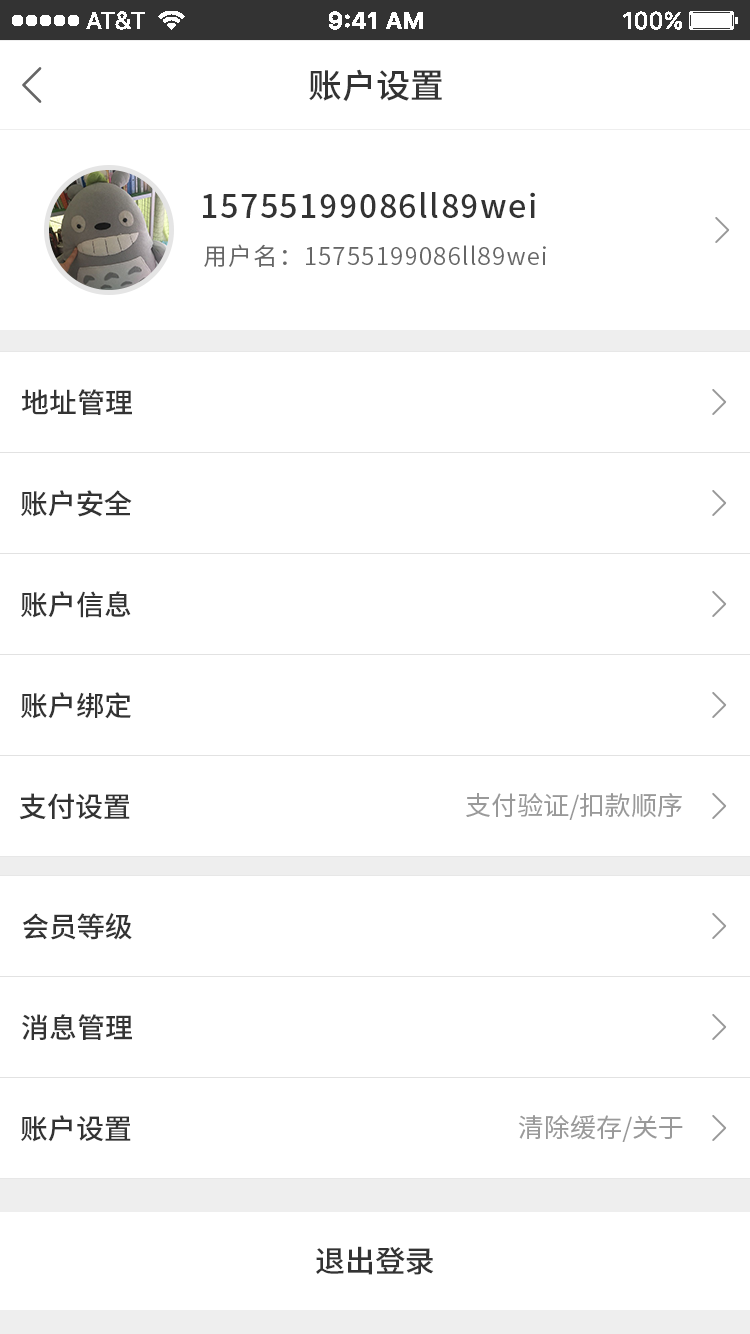
<style>
.page{position:relative;width:750px;height:1334px;background:#ffffff}
.page>*{position:absolute;margin:0}
.t1{font:34px "SourceHanSansCN-Medium";color:#333333}
.t2{font:32px "SourceHanSansCN-Medium";letter-spacing:0.05em;color:#333333}
.t3{font:24px "SourceHanSansCN-Normal";letter-spacing:0.05em;color:#666666}
.t4{font:28px "SourceHanSansCN-Medium";color:#333333}
.t5{font:26px "SourceHanSansCN-Regular";color:#999999}
.t6{font:30px "SourceHanSansCN-Medium";color:#333333}
</style>
<div class="page">
<p class="t1" style="left:309px;top:69px;width:133px;height:33px">账户设置</p>
<p class="t2" style="left:203px;top:192px;width:332px;height:26px">15755199086ll89wei</p>
<p class="t3" style="left:204px;top:244px;width:342px;height:23px">用户名：15755199086ll89wei</p>
<p class="t4" style="left:21px;top:389px;width:111px;height:26px">地址管理</p>
<p class="t4" style="left:21px;top:490px;width:111px;height:27px">账户安全</p>
<p class="t4" style="left:21px;top:591px;width:110px;height:27px">账户信息</p>
<p class="t4" style="left:21px;top:692px;width:110px;height:27px">账户绑定</p>
<p class="t4" style="left:19px;top:793px;width:111px;height:27px">支付设置</p>
<p class="t5" style="left:466px;top:793px;width:216px;height:27px">支付验证/扣款顺序</p>
<p class="t4" style="left:22px;top:913px;width:110px;height:27px">会员等级</p>
<p class="t4" style="left:22px;top:1014px;width:110px;height:26px">消息管理</p>
<p class="t4" style="left:21px;top:1115px;width:110px;height:27px">账户设置</p>
<p class="t5" style="left:518px;top:1115px;width:165px;height:27px">清除缓存/关于</p>
<p class="t6" style="left:316px;top:1246px;width:118px;height:29px">退出登录</p>
</div>
